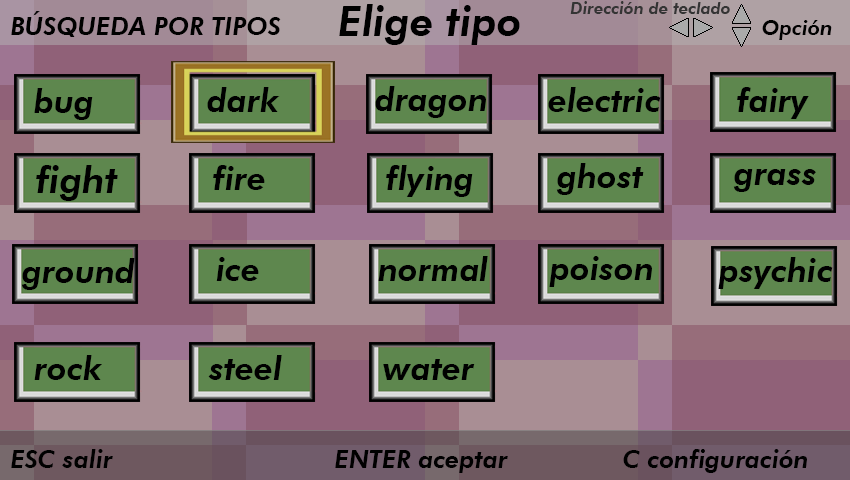
<style>
.page{position:relative;width:850px;height:480px}
.page>*{position:absolute;margin:0}
.t1{font:41.7px "FuturaBT-HeavyItalic";color:#000000}
.t2{font:16.7px "FuturaBT-HeavyItalic";color:#343434}
.t3{font:25px "FuturaBT-HeavyItalic";color:#000000}
.t4{font:20.8px "FuturaBT-HeavyItalic";color:#000000}
.t5{font:33.3px "FuturaBT-HeavyItalic";color:#000000}
.t6{font:37.5px "FuturaBT-HeavyItalic";color:#000000}
</style>
<div class="page">
<p class="t1" style="left:339px;top:4px;width:181px;height:41px">Elige tipo</p>
<p class="t2" style="left:570px;top:1px;width:160px;height:13px">Dirección de teclado</p>
<p class="t3" style="left:11px;top:11px;width:270px;height:26px">BÚSQUEDA POR TIPOS</p>
<p class="t4" style="left:762px;top:20px;width:70px;height:20px">Opción</p>
<p class="t5" style="left:34px;top:88px;width:59px;height:32px">bug</p>
<p class="t5" style="left:207px;top:87px;width:73px;height:25px">dark</p>
<p class="t5" style="left:375px;top:86px;width:111px;height:32px">dragon</p>
<p class="t5" style="left:548px;top:87px;width:113px;height:25px">electric</p>
<p class="t5" style="left:737px;top:87px;width:72px;height:32px">fairy</p>
<p class="t6" style="left:36px;top:165px;width:82px;height:36px">fight</p>
<p class="t5" style="left:213px;top:165px;width:52px;height:25px">fire</p>
<p class="t5" style="left:386px;top:165px;width:87px;height:32px">flying</p>
<p class="t5" style="left:556px;top:163px;width:88px;height:32px">ghost</p>
<p class="t5" style="left:733px;top:169px;width:83px;height:23px">grass</p>
<p class="t5" style="left:216px;top:257px;width:43px;height:24px">ice</p>
<p class="t5" style="left:378px;top:256px;width:110px;height:25px">normal</p>
<p class="t5" style="left:549px;top:256px;width:103px;height:31px">poison</p>
<p class="t5" style="left:718px;top:257px;width:115px;height:32px">psychic</p>
<p class="t5" style="left:21px;top:258px;width:114px;height:32px">ground</p>
<p class="t5" style="left:34px;top:355px;width:68px;height:25px">rock</p>
<p class="t5" style="left:208px;top:355px;width:74px;height:25px">steel</p>
<p class="t5" style="left:383px;top:359px;width:92px;height:21px">water</p>
<p class="t3" style="left:11px;top:449px;width:796px;height:24px">ESC salir         ENTER aceptar      C configuración</p>
</div>
